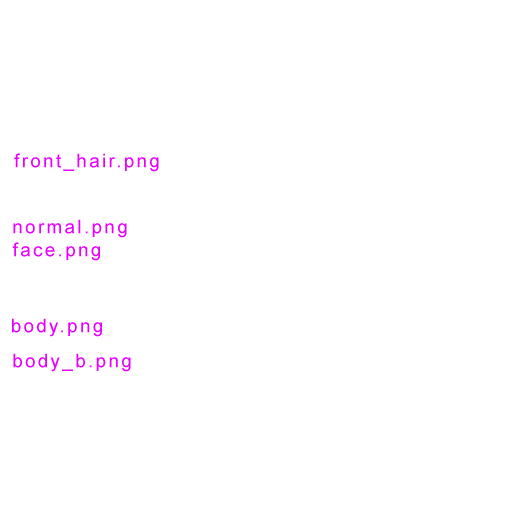
<style>
.page{position:relative;width:512px;height:512px;background:#ffffff}
.page>*{position:absolute;margin:0}
.t1{font:18.7px "ArialMT";letter-spacing:0.13em;color:#ea00ff}
</style>
<div class="page">
<p class="t1" style="left:14px;top:153px;width:145px;height:19px">front_hair.png</p>
<p class="t1" style="left:13px;top:219px;width:114px;height:19px">normal.png</p>
<p class="t1" style="left:12px;top:242px;width:88px;height:19px">face.png</p>
<p class="t1" style="left:12px;top:318px;width:90px;height:19px">body.png</p>
<p class="t1" style="left:13px;top:353px;width:118px;height:19px">body_b.png</p>
</div>
